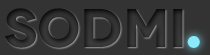
<style>
.page{position:relative;width:210px;height:55px;background:#333333}
.page>*{position:absolute;margin:0}
.t1{font:54.4px "Novecentowide-Bold";color:#2f2f2f}
.t2{font:77px "Novecentowide-Bold";color:#8aeafa}
</style>
<div class="page">
<p class="t1" style="left:5px;top:8px;width:178px;height:40px">SODMI</p>
<p class="t2" style="left:187px;top:36px;width:13px;height:12px">.</p>
</div>
